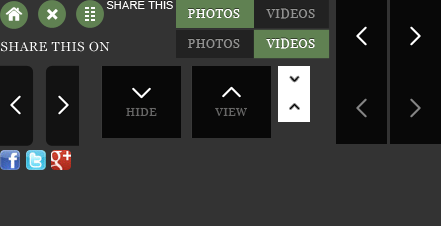
<style>
.page{position:relative;width:441px;height:226px;background:#333333}
.page>*{position:absolute;margin:0}
.t1{font:11px "ArialMT";letter-spacing:0.01em;color:#ffffff;text-transform:uppercase}
.t2{font:12px "Georgia";letter-spacing:0.05em;color:#ffffff;text-transform:uppercase}
.t3{font:12px "Georgia";letter-spacing:0.05em;color:#919191;text-transform:uppercase}
.t4{font:13px "Georgia";letter-spacing:0.05em;color:#ffffff;text-transform:uppercase}
.t5{font:11px "Georgia";letter-spacing:0.05em;color:#676767;text-transform:uppercase}
</style>
<div class="page">
<p class="t1" style="left:106px;top:1px;width:67px;height:8px">Share This on</p>
<p class="t2" style="left:188px;top:9px;width:52px;height:9px">Photos</p>
<p class="t3" style="left:266px;top:8px;width:49px;height:11px">Videos</p>
<p class="t4" style="left:1px;top:41px;width:109px;height:11px">Share This on</p>
<p class="t3" style="left:188px;top:39px;width:52px;height:9px">Photos</p>
<p class="t2" style="left:266px;top:38px;width:49px;height:11px">Videos</p>
<p class="t5" style="left:126px;top:108px;width:31px;height:8px">Hide</p>
<p class="t5" style="left:215px;top:108px;width:32px;height:8px">View</p>
</div>
